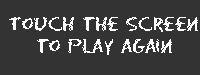
<style>
.page{position:relative;width:200px;height:75px;background:#333333}
.page>*{position:absolute;margin:0}
.t1{font:18px "Eraser-Regular";color:#ffffff}
</style>
<div class="page">
<p class="t1" style="left:9px;top:17px;width:189px;height:38px;text-align:center">Touch the Screen<br>to play again</p>
</div>
